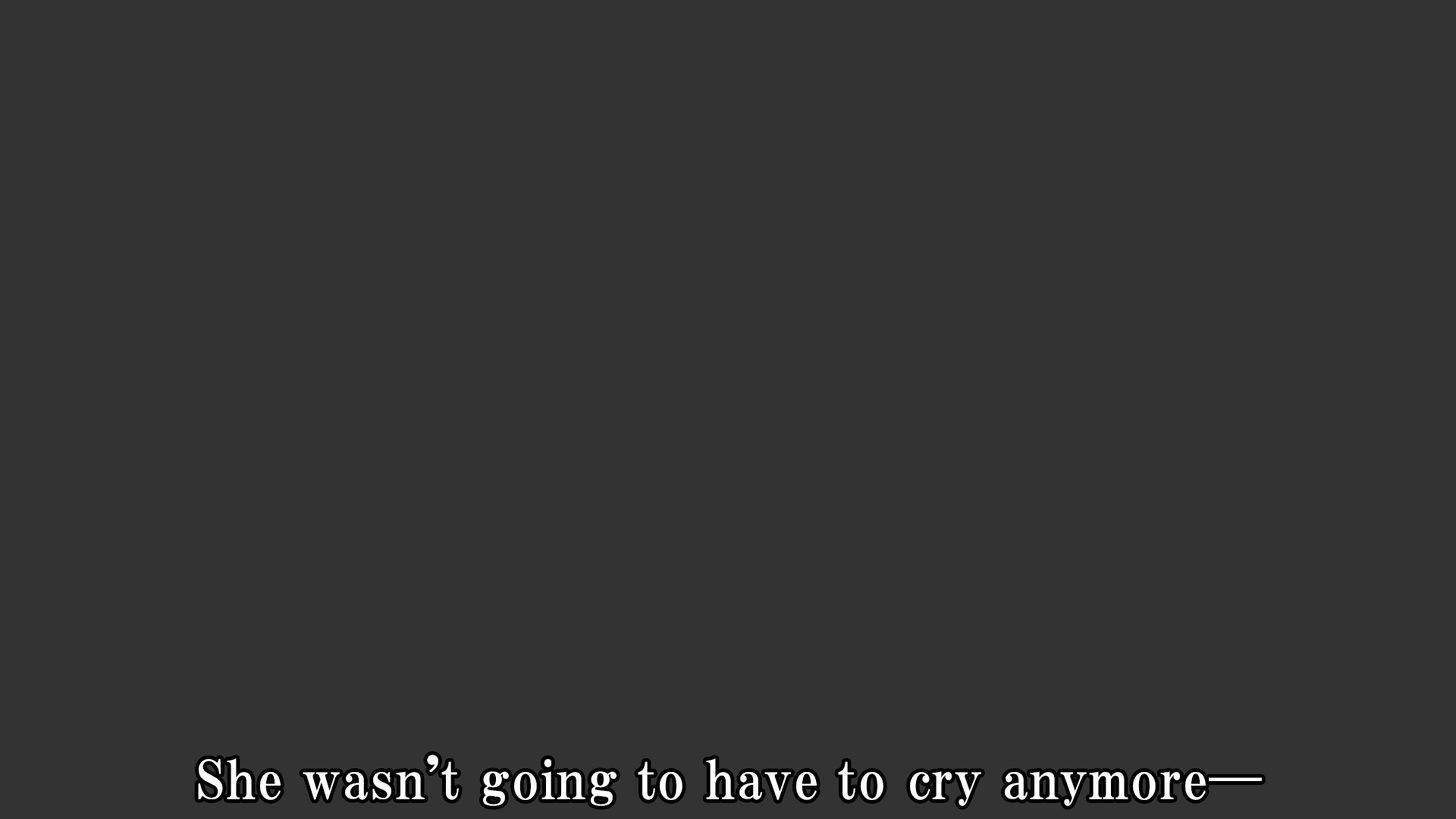
<style>
.page{position:relative;width:1456px;height:819px;background:#333333}
.page>*{position:absolute;margin:0}
.t1{font:53.1px "HGPMinchoE";letter-spacing:0.025em;color:#ffffff}
</style>
<div class="page">
<p class="t1" style="left:198px;top:755px;width:1064px;height:51px">She wasn't going to have to cry anymore—</p>
</div>
